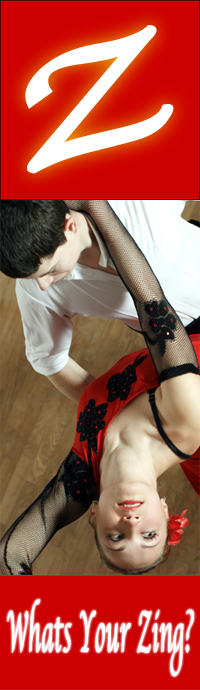
<style>
.page{position:relative;width:200px;height:690px;background:#cc0000}
.page>*{position:absolute;margin:0}
.t1{font:59.8px "Apple-Chancery";color:#ffffff;font-weight:bold;scale:0.39 1}
</style>
<div class="page">
<p class="t1" style="left:7px;top:599px;width:187px;height:78px">Whats Your Zing?</p>
</div>
